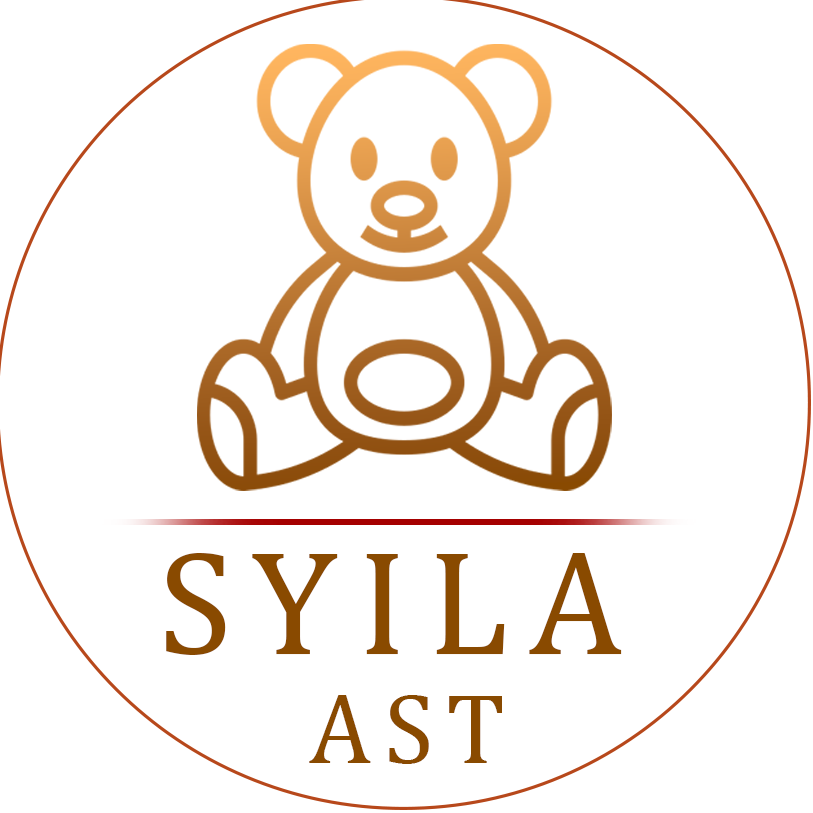
<style>
.page{position:relative;width:813px;height:813px;background:#ffffff}
.page>*{position:absolute;margin:0}
.t1{font:150px "Cambria";letter-spacing:0.14em;color:#894a00}
.t2{font:100px "Cambria";letter-spacing:0.14em;color:#894a00}
</style>
<div class="page">
<p class="t1" style="left:166px;top:553px;width:456px;height:102px">SYILA</p>
<p class="t2" style="left:309px;top:695px;width:193px;height:69px">AST</p>
</div>
